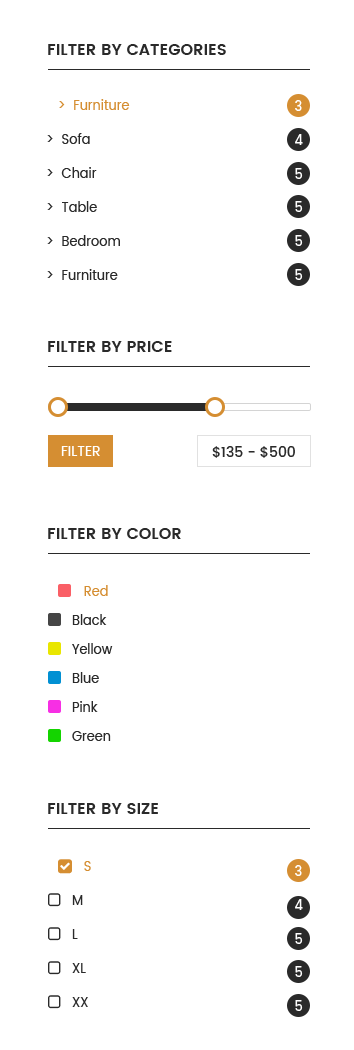
<style>
.page{position:relative;width:354px;height:1050px;background:#ffffff}
.page>*{position:absolute;margin:0}
.t1{font:16px "Poppins-SemiBold";color:#2a2a2a;text-transform:uppercase}
.t2{font:13px/34px "Poppins-Regular";color:#2a2a2a}
.t3{font:13px/34px "Poppins-Regular";color:#d58e32}
.t4{font:13px "Poppins-Medium";color:#ffffff}
.t5{font:14px "Poppins-Regular";color:#ffffff;text-transform:uppercase}
.t6{font:14px "Poppins-Medium";color:#2a2a2a}
.t7{font:13px/29px "Poppins-Regular";color:#2a2a2a}
.t8{font:13px/29px "Poppins-Regular";color:#d58e32}
.t9{font:13px/34px "Poppins-Regular";color:#ff6e40}
</style>
<div class="page">
<p class="t1" style="left:48px;top:44px;width:178px;height:11px">Filter By categories</p>
<p class="t2" style="left:47px;top:99px;width:83px;height:181px"><span class="t3">   &gt;  Furniture<br></span>&gt;  Sofa<br>&gt;  Chair<br>&gt;  Table<br>&gt;  Bedroom<br>&gt;  Furniture</p>
<p class="t4" style="left:295px;top:100px;width:7px;height:11px">3</p>
<p class="t4" style="left:295px;top:134px;width:8px;height:11px">4</p>
<p class="t4" style="left:295px;top:168px;width:8px;height:11px">5</p>
<p class="t4" style="left:295px;top:201px;width:8px;height:11px">5</p>
<p class="t4" style="left:295px;top:235px;width:8px;height:11px">5</p>
<p class="t4" style="left:295px;top:269px;width:8px;height:11px">5</p>
<p class="t1" style="left:48px;top:341px;width:124px;height:11px">Filter By Price</p>
<p class="t5" style="left:61px;top:446px;width:39px;height:10px">Filter</p>
<p class="t6" style="left:212px;top:446px;width:83px;height:12px">$135 - $500</p>
<p class="t1" style="left:48px;top:528px;width:133px;height:11px">Filter By color</p>
<p class="t7" style="left:72px;top:585px;width:41px;height:156px"><span class="t8">   Red<br></span>Black<br>Yellow<br>Blue<br>Pink<br>Green</p>
<p class="t1" style="left:48px;top:803px;width:110px;height:11px">Filter By size</p>
<p class="t2" style="left:72px;top:861px;width:19px;height:146px"><span class="t9">   </span><span class="t3">S <br></span>M <br>L <br>XL <br>XX</p>
<p class="t4" style="left:295px;top:865px;width:7px;height:11px">3</p>
<p class="t4" style="left:295px;top:899px;width:8px;height:11px">4</p>
<p class="t4" style="left:295px;top:933px;width:8px;height:11px">5</p>
<p class="t4" style="left:295px;top:966px;width:8px;height:11px">5</p>
<p class="t4" style="left:295px;top:1000px;width:8px;height:11px">5</p>
</div>
